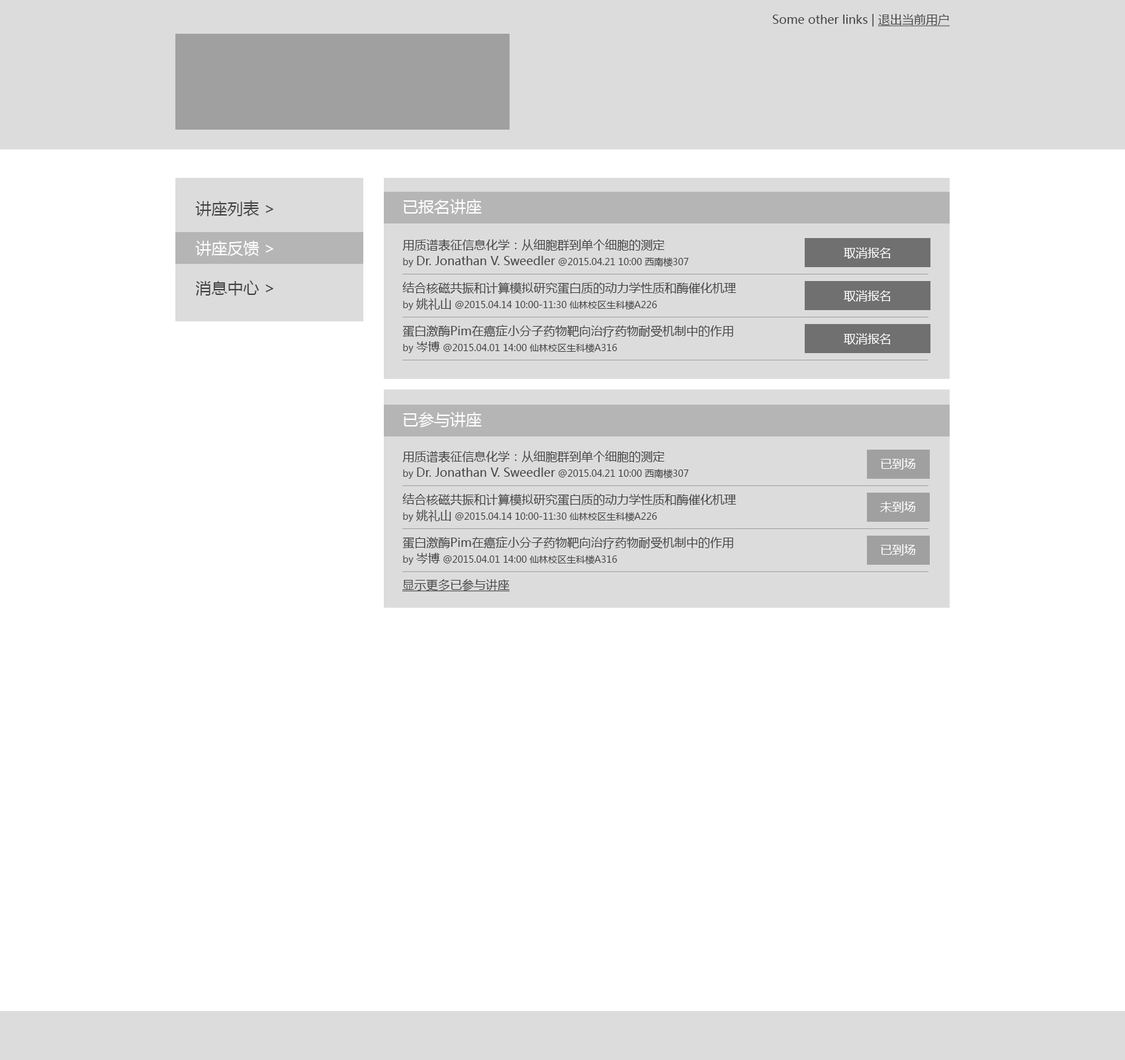
<style>
.page{position:relative;width:1125px;height:1060px;background:#ffffff}
.page>*{position:absolute;margin:0}
.t1{font:11.9px "MicrosoftYaHei";color:#434343}
.t2{font:11.9px "MicrosoftYaHei";color:#434343;text-decoration:underline}
.t3{font:15.9px/39.7px "MicrosoftYaHei";color:#434343}
.t4{font:15.9px/39.7px "MicrosoftYaHei";color:#ffffff}
.t5{font:15.9px "MicrosoftYaHei";color:#ffffff}
.t6{font:11.9px/15.9px "MicrosoftYaHei";color:#434343}
.t7{font:9.3px/15.9px "MicrosoftYaHei";color:#434343}
.t8{font:11.9px "MicrosoftYaHei";color:#ffffff}
</style>
<div class="page">
<p class="t1" style="left:772px;top:14px;width:177px;height:12px">Some other links | <span class="t2">退出当前用户</span></p>
<p class="t3" style="left:195px;top:200px;width:78px;height:96px">讲座列表 &gt;<br><span class="t4">讲座反馈 &gt;<br></span>消息中心 &gt;</p>
<p class="t5" style="left:403px;top:199px;width:79px;height:15px">已报名讲座</p>
<p class="t6" style="left:402px;top:239px;width:287px;height:28px">用质谱表征信息化学：从细胞群到单个细胞的测定<br><span class="t7">by </span>Dr. Jonathan V. Sweedler<span class="t7"> @2015.04.21 10:00 西南楼307</span></p>
<p class="t8" style="left:843px;top:247px;width:47px;height:12px">取消报名</p>
<p class="t7" style="left:402px;top:282px;width:334px;height:28px"><span class="t6">结合核磁共振和计算模拟研究蛋白质的动力学性质和酶催化机理<br></span>by <span class="t6">姚礼山</span> @2015.04.14 10:00-11:30 仙林校区生科楼A226</p>
<p class="t8" style="left:843px;top:290px;width:47px;height:12px">取消报名</p>
<p class="t6" style="left:402px;top:325px;width:331px;height:28px">蛋白激酶Pim在癌症小分子药物靶向治疗药物耐受机制中的作用<br><span class="t7">by </span>岑博<span class="t7"> @2015.04.01 14:00 仙林校区生科楼A316</span></p>
<p class="t8" style="left:843px;top:333px;width:47px;height:12px">取消报名</p>
<p class="t5" style="left:403px;top:412px;width:79px;height:15px">已参与讲座</p>
<p class="t6" style="left:402px;top:450px;width:287px;height:29px">用质谱表征信息化学：从细胞群到单个细胞的测定<br><span class="t7">by </span>Dr. Jonathan V. Sweedler<span class="t7"> @2015.04.21 10:00 西南楼307</span></p>
<p class="t8" style="left:880px;top:458px;width:35px;height:12px">已到场</p>
<p class="t7" style="left:402px;top:493px;width:334px;height:29px"><span class="t6">结合核磁共振和计算模拟研究蛋白质的动力学性质和酶催化机理<br></span>by <span class="t6">姚礼山</span> @2015.04.14 10:00-11:30 仙林校区生科楼A226</p>
<p class="t8" style="left:880px;top:501px;width:35px;height:12px">未到场</p>
<p class="t6" style="left:402px;top:536px;width:331px;height:29px">蛋白激酶Pim在癌症小分子药物靶向治疗药物耐受机制中的作用<br><span class="t7">by </span>岑博<span class="t7"> @2015.04.01 14:00 仙林校区生科楼A316</span></p>
<p class="t8" style="left:880px;top:544px;width:35px;height:12px">已到场</p>
<p class="t2" style="left:402px;top:579px;width:107px;height:13px">显示更多已参与讲座</p>
</div>
